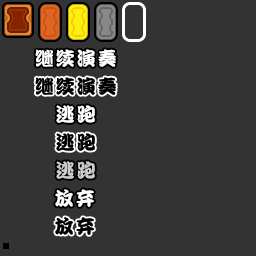
<style>
.page{position:relative;width:256px;height:256px;background:#333333}
.page>*{position:absolute;margin:0}
.t1{font:19px "DFPKanTingLiuW9";letter-spacing:0.1em;color:#ffffff}
.t2{font:19px "DFPKanTingLiuW9";letter-spacing:0.1em;color:#000000}
.t3{font:19px "DFPKanTingLiuW9";letter-spacing:0.1em;color:#cccccc}
</style>
<div class="page">
<p class="t1" style="left:35px;top:49px;width:81px;height:18px">继续演奏</p>
<p class="t2" style="left:35px;top:77px;width:81px;height:18px">继续演奏</p>
<p class="t1" style="left:56px;top:105px;width:39px;height:18px">逃跑</p>
<p class="t2" style="left:56px;top:133px;width:39px;height:18px">逃跑</p>
<p class="t3" style="left:56px;top:161px;width:39px;height:18px">逃跑</p>
<p class="t1" style="left:55px;top:189px;width:39px;height:18px">放弃</p>
<p class="t2" style="left:55px;top:217px;width:39px;height:18px">放弃</p>
</div>
